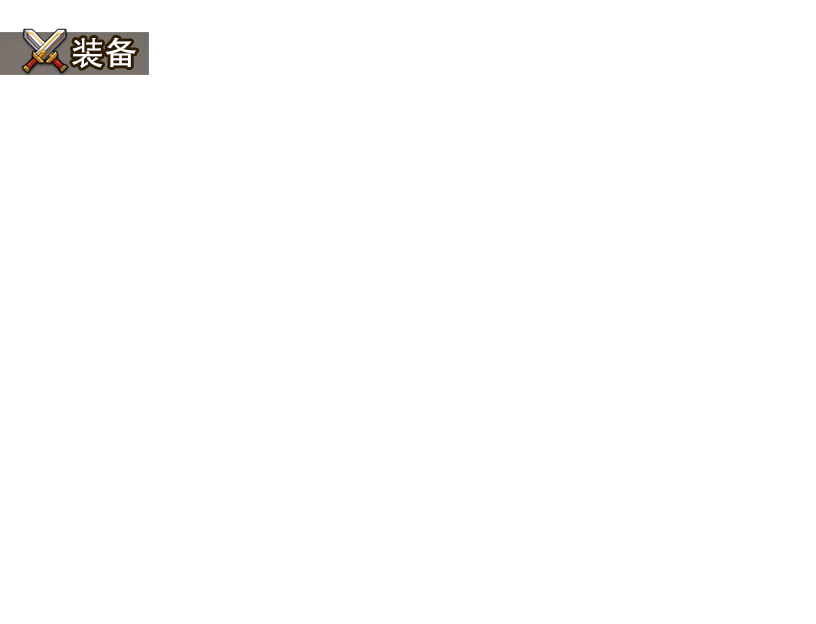
<style>
.page{position:relative;width:816px;height:624px;background:#ffffff}
.page>*{position:absolute;margin:0}
.t1{font:32.3px "FZHTJW--GB1-0";letter-spacing:-0.025em;color:#ffffff;scale:1.04 1}
</style>
<div class="page">
<p class="t1" style="left:72px;top:37px;width:65px;height:31px">装备</p>
</div>
